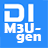
<style>
.page{position:relative;width:48px;height:48px;background:#288cfb}
.page>*{position:absolute;margin:0}
.t1{font:15px/8.2px "BerlinSansFBDemi-Bold";letter-spacing:0.03em;color:#ffffff}
</style>
<div class="page">
<p class="t1" style="left:4px;top:23px;width:37px;height:20px;text-align:center">M3U-<br>   gen</p>
</div>
